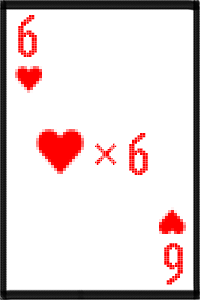
<style>
.page{position:relative;width:200px;height:300px;background:#ffffff}
.page>*{position:absolute;margin:0}
.t1{font:53.2px "FZXS24--GB1-0";color:#ff0000;scale:1.21 1}
.t2{font:43.1px "FZXS24--GB1-0";color:#ff0000}
.t3{font:52.5px "FZXS24--GB1-0";color:#ff0000;scale:1.22 1}
</style>
<div class="page">
<p class="t1" style="left:18px;top:15px;width:19px;height:42px">6</p>
<p class="t1" style="left:129px;top:133px;width:19px;height:42px">6</p>
<p class="t2" style="left:95px;top:143px;width:22px;height:22px">x</p>
<p class="t3" style="left:164px;top:243px;width:19px;height:42px;rotate:180deg">6</p>
</div>
